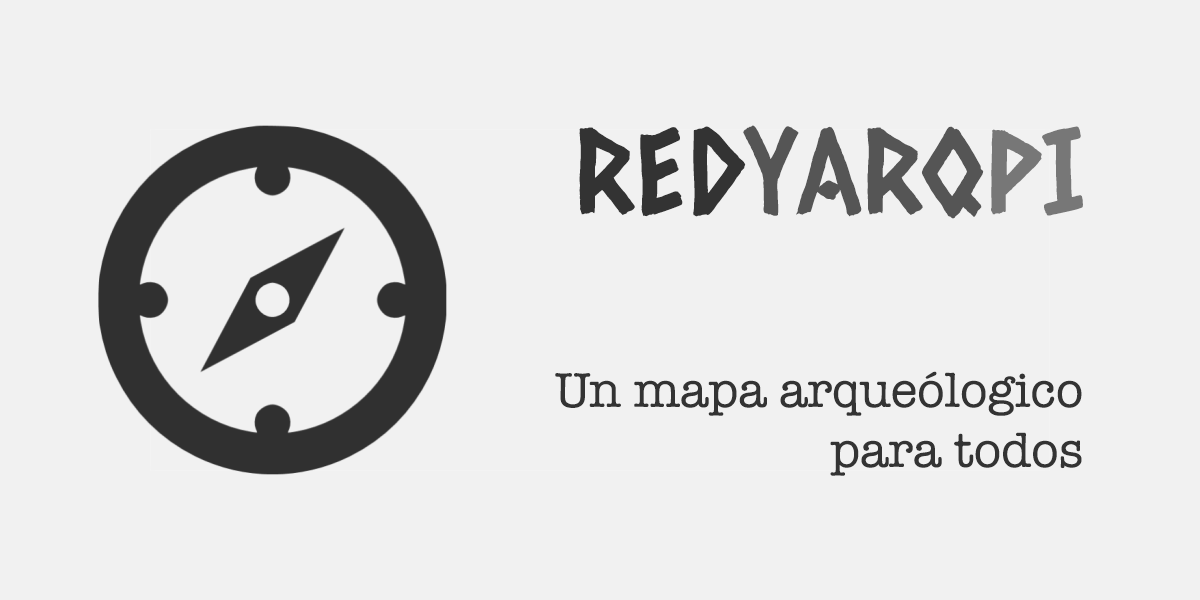
<style>
.page{position:relative;width:1200px;height:600px;background:#f1f1f1}
.page>*{position:absolute;margin:0}
.t1{font:116.7px "CaesarDressing";color:#555555}
.t2{font:116.7px "CaesarDressing";color:#333333}
.t3{font:116.7px "CaesarDressing";color:#777777}
.t4{font:50px "AmericanTypewriter";color:#333333}
</style>
<div class="page">
<p class="t1" style="left:579px;top:125px;width:504px;height:94px"><span class="t2">RED</span>YARQ<span class="t3">PI</span></p>
<p class="t4" style="left:555px;top:371px;width:527px;height:105px;text-align:right">Un mapa arqueólogico<br>para todos</p>
</div>
